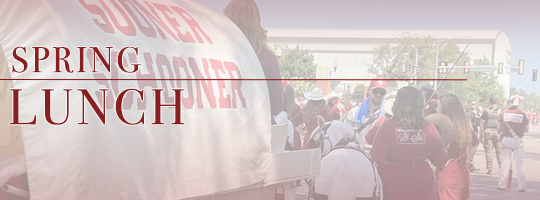
<style>
.page{position:relative;width:540px;height:200px}
.page>*{position:absolute;margin:0}
.t1{font:36px "BodoniSvtyTwoITCTT-Book";letter-spacing:0.075em;color:#841617}
.t2{font:50px "BodoniSvtyTwoITCTT-Book";letter-spacing:0.075em;color:#841617}
</style>
<div class="page">
<p class="t1" style="left:12px;top:46px;width:129px;height:27px">SPRING</p>
<p class="t2" style="left:9px;top:88px;width:176px;height:37px">LUNCH</p>
</div>
